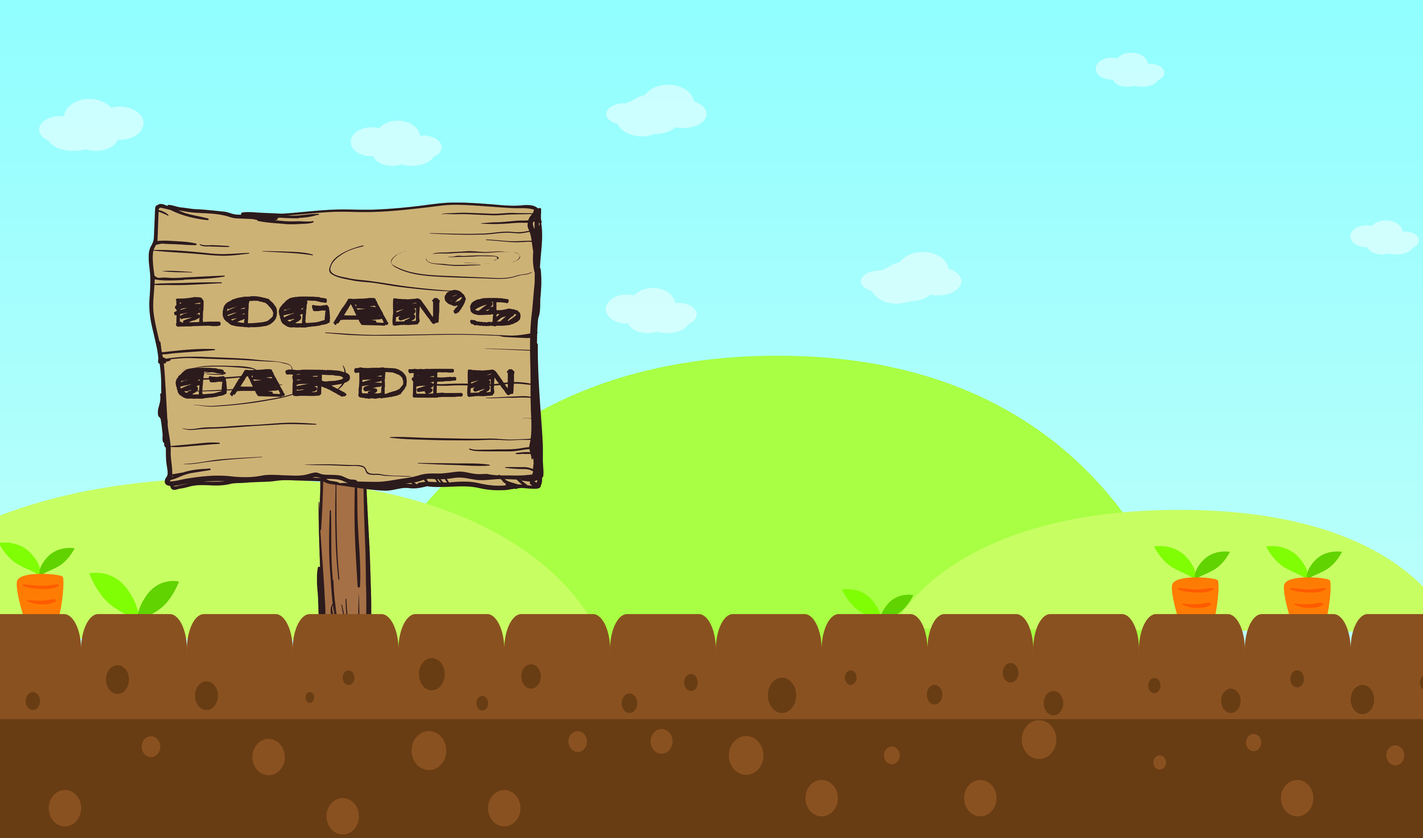
<style>
.page{position:relative;width:1423px;height:838px}
.page>*{position:absolute;margin:0}
.t1{font:59.3px "FatStackBB";color:#2c1a1d}
</style>
<div class="page">
<p class="t1" style="left:174px;top:290px;width:347px;height:109px;text-align:center">LOGAN’S<br>GARDEN</p>
</div>
